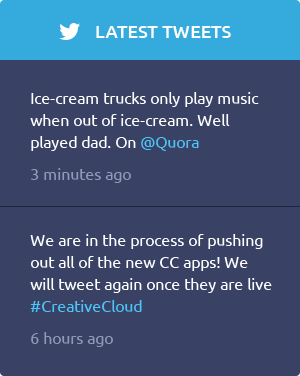
<style>
.page{position:relative;width:300px;height:376px;background:#394264}
.page>*{position:absolute;margin:0}
.t1{font:18px "Ubuntu-Medium";color:#ffffff;text-transform:uppercase}
.t2{font:16px/22px "Ubuntu";color:#ffffff}
.t3{font:16px/22px "Ubuntu";color:#4fc4f6}
.t4{font:16px/22px "Ubuntu";color:#9099b7}
</style>
<div class="page">
<p class="t1" style="left:96px;top:26px;width:135px;height:12px">Latest Tweets</p>
<p class="t2" style="left:30px;top:92px;width:229px;height:91px">Ice-cream trucks only play music when out of ice-cream. Well played dad. On<span class="t3"> @Quora<br></span><span class="t4">3 minutes ago</span></p>
<p class="t2" style="left:30px;top:234px;width:242px;height:113px">We are in the process of pushing out all of the new CC apps! We will tweet again once they are live <span class="t3">#CreativeCloud<br></span><span class="t4">6 hours ago</span></p>
</div>
